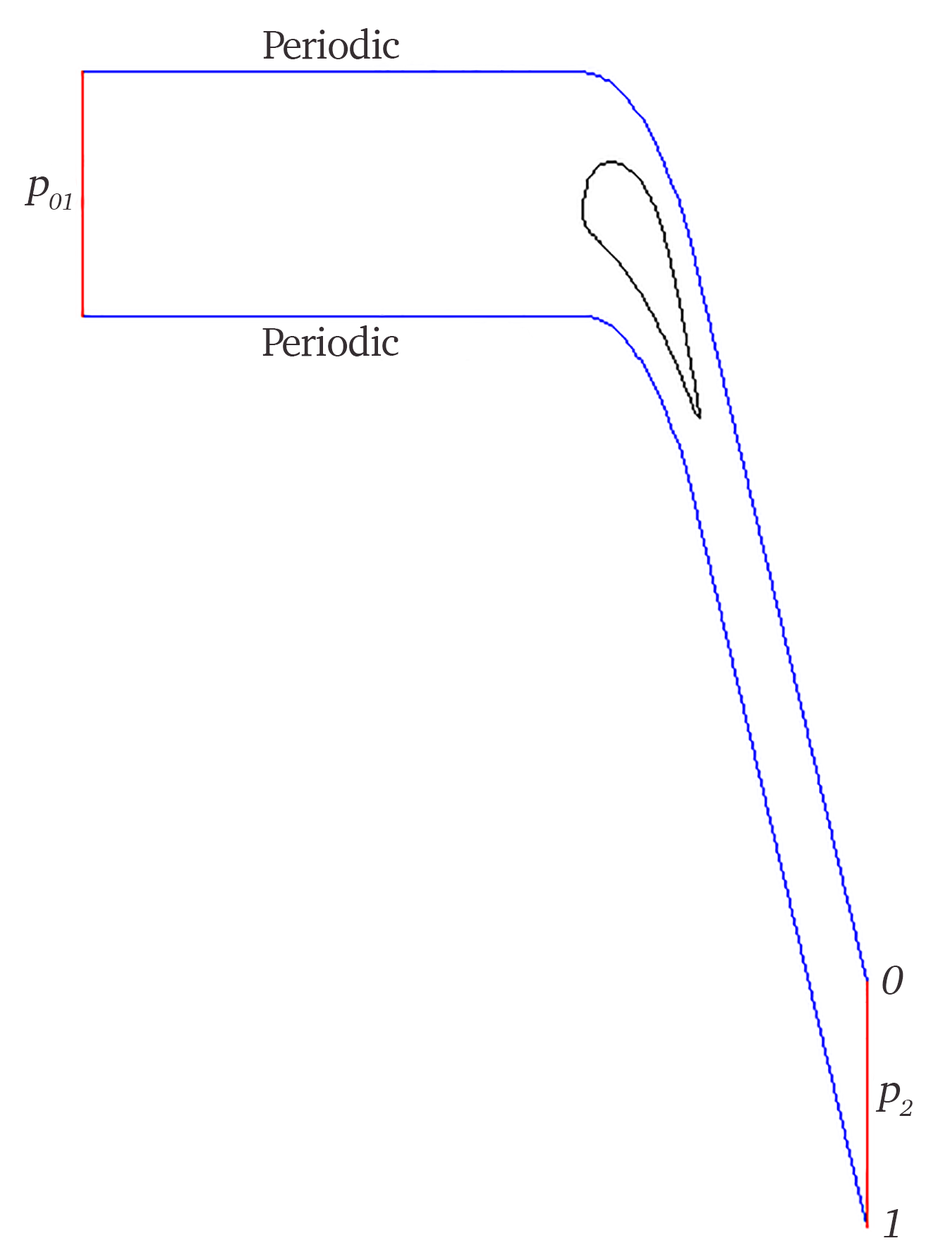
<style>
.page{position:relative;width:950px;height:1255px;background:#ffffff}
.page>*{position:absolute;margin:0}
.t1{font:41.2px "Charter-Roman";letter-spacing:-0.02em;color:#352e31}
.t2{font:41.2px "Charter-Roman";letter-spacing:-0.02em;color:#352e31;font-style:italic}
</style>
<div class="page">
<p class="t1" style="left:263px;top:28px;width:136px;height:31px">Periodic</p>
<p class="t2" style="left:24px;top:176px;width:47px;height:34px">p01</p>
<p class="t1" style="left:262px;top:325px;width:137px;height:31px">Periodic</p>
<p class="t2" style="left:883px;top:965px;width:21px;height:29px">0</p>
<p class="t2" style="left:876px;top:1082px;width:37px;height:34px">p2</p>
<p class="t2" style="left:884px;top:1209px;width:15px;height:28px">1</p>
</div>
